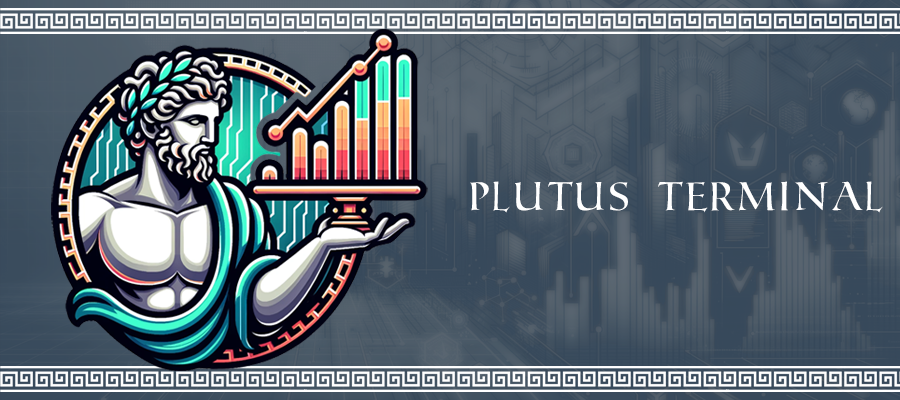
<style>
.page{position:relative;width:900px;height:400px}
.page>*{position:absolute;margin:0}
.t1{font:40px "RomanSD";color:#ffffff}
</style>
<div class="page">
<p class="t1" style="left:470px;top:181px;width:413px;height:32px">Plutus Terminal</p>
</div>
